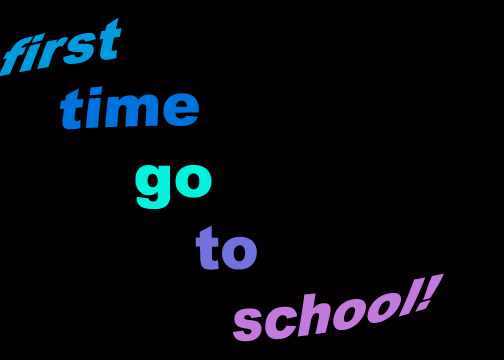
<style>
.page{position:relative;width:504px;height:360px;background:#020000}
.page>*{position:absolute;margin:0}
.t1{font:48px "Arial-Black";color:#c37ade}
.t2{font:48px "Arial-Black";color:#009bde}
.t3{font:48px "Arial-Black";color:#0072de}
.t4{font:48px "Arial-Black";color:#00f4de}
.t5{font:48px "Arial-Black";color:#7272de}
</style>
<div class="page">
<p class="t1" style="left:0px;top:17px;width:444px;height:325px"><span class="t2">first<br>    </span><span class="t3">time<br></span><span class="t4">        go<br>           </span><span class="t5">to<br>             </span>school!</p>
</div>
